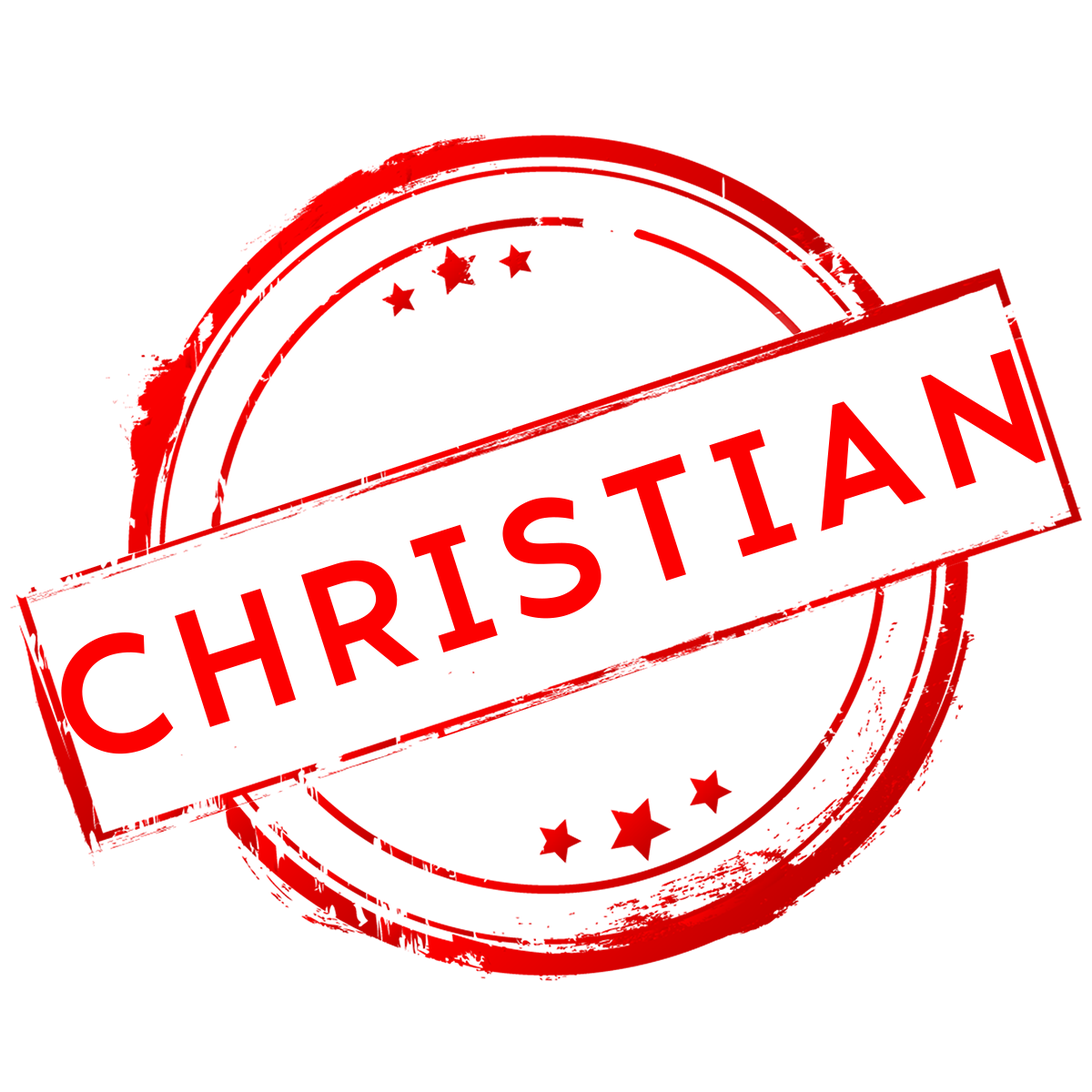
<style>
.page{position:relative;width:1092px;height:1092px;background:#ffffff}
.page>*{position:absolute;margin:0}
.t1{font:182px "NyataFTR-Regular";letter-spacing:0.1em;color:#fd0000}
</style>
<div class="page">
<p class="t1" style="left:61px;top:349px;width:985px;height:405px;rotate:-18deg">CHRISTIAN</p>
</div>
